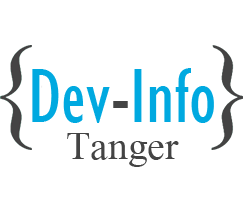
<style>
.page{position:relative;width:250px;height:200px;background:#ffffff}
.page>*{position:absolute;margin:0}
.t1{font:80px "GillSansMT-Condensed";color:#00a9e0}
.t2{font:80px "GillSansMT-Condensed";color:#444444}
.t3{font:60px "AngsanaNew";color:#444444}
</style>
<div class="page">
<p class="t1" style="left:32px;top:68px;width:182px;height:55px">Dev<span class="t2">-</span>Info</p>
<p class="t3" style="left:67px;top:133px;width:112px;height:34px">Tanger</p>
</div>
